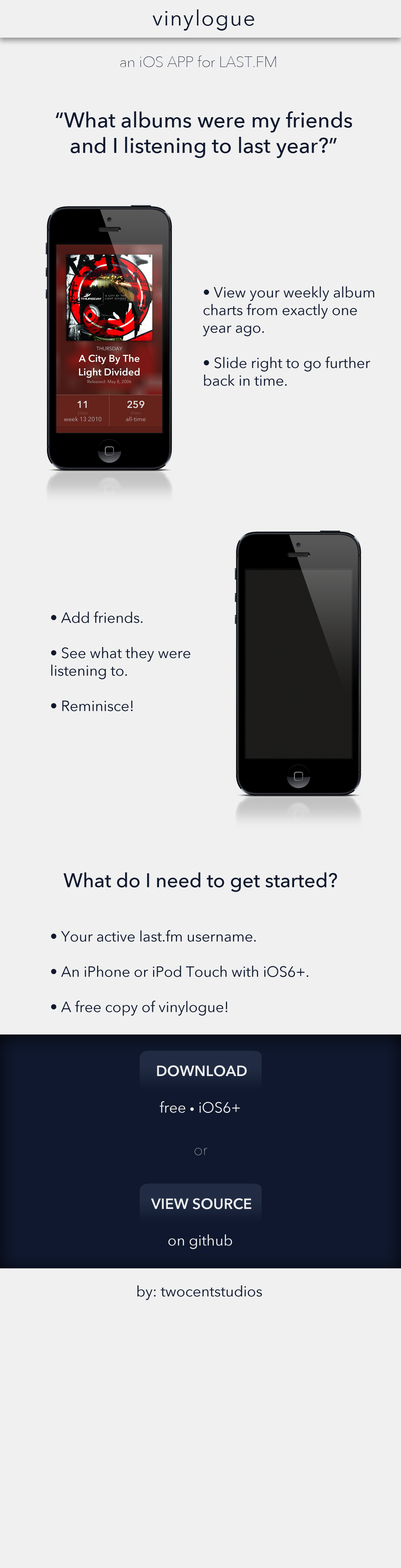
<style>
.page{position:relative;width:401px;height:1568px;background:#f0f0f0}
.page>*{position:absolute;margin:0}
.t1{font:21.2px "AvenirNext-Regular";letter-spacing:0.05em;color:#0f182e}
.t2{font:14.7px "AvenirNext-UltraLight";color:#0f182e}
.t3{font:21.2px "AvenirNext-Medium";color:#0f182e}
.t4{font:14.7px "AvenirNext-Regular";color:#0f182e}
.t5{font:19.6px "AvenirNext-Medium";color:#0f182e}
.t6{font:14.7px "AvenirNext-DemiBold";color:#f0f0f0}
.t7{font:14.7px "AvenirNext-Regular";color:#f0f0f0}
.t8{font:9.8px "AvenirNext-Regular";color:#f0f0f0}
.t9{font:14.7px "AvenirNext-UltraLight"}
</style>
<div class="page">
<p class="t1" style="left:152px;top:9px;width:102px;height:22px">vinylogue</p>
<p class="t2" style="left:120px;top:56px;width:156px;height:11px">an iOS APP for LAST.FM</p>
<p class="t3" style="left:56px;top:111px;width:296px;height:47px;text-align:center">“What albums were my friends and I listening to last year?”</p>
<p class="t4" style="left:203px;top:286px;width:172px;height:100px">• View your weekly album charts from exactly one year ago.<br><br>• Slide right to go further back in time.</p>
<p class="t4" style="left:51px;top:611px;width:140px;height:100px">• Add friends.<br><br>• See what they were listening to.<br><br>• Reminisce!</p>
<p class="t5" style="left:64px;top:872px;width:274px;height:20px">What do I need to get started?</p>
<p class="t4" style="left:51px;top:930px;width:258px;height:86px">• Your active last.fm username.<br><br>• An iPhone or iPod Touch with iOS6+.<br><br>• A free copy of vinylogue!</p>
<p class="t6" style="left:157px;top:1065px;width:90px;height:11px">DOWNLOAD</p>
<p class="t7" style="left:160px;top:1101px;width:80px;height:12px">free <span class="t8">•</span> iOS6+</p>
<p class="t9" style="left:195px;top:1148px;width:13px;height:7px">or</p>
<p class="t6" style="left:151px;top:1198px;width:101px;height:11px">VIEW SOURCE</p>
<p class="t7" style="left:169px;top:1234px;width:63px;height:15px">on github</p>
<p class="t4" style="left:138px;top:1285px;width:124px;height:15px">by: twocentstudios</p>
</div>
